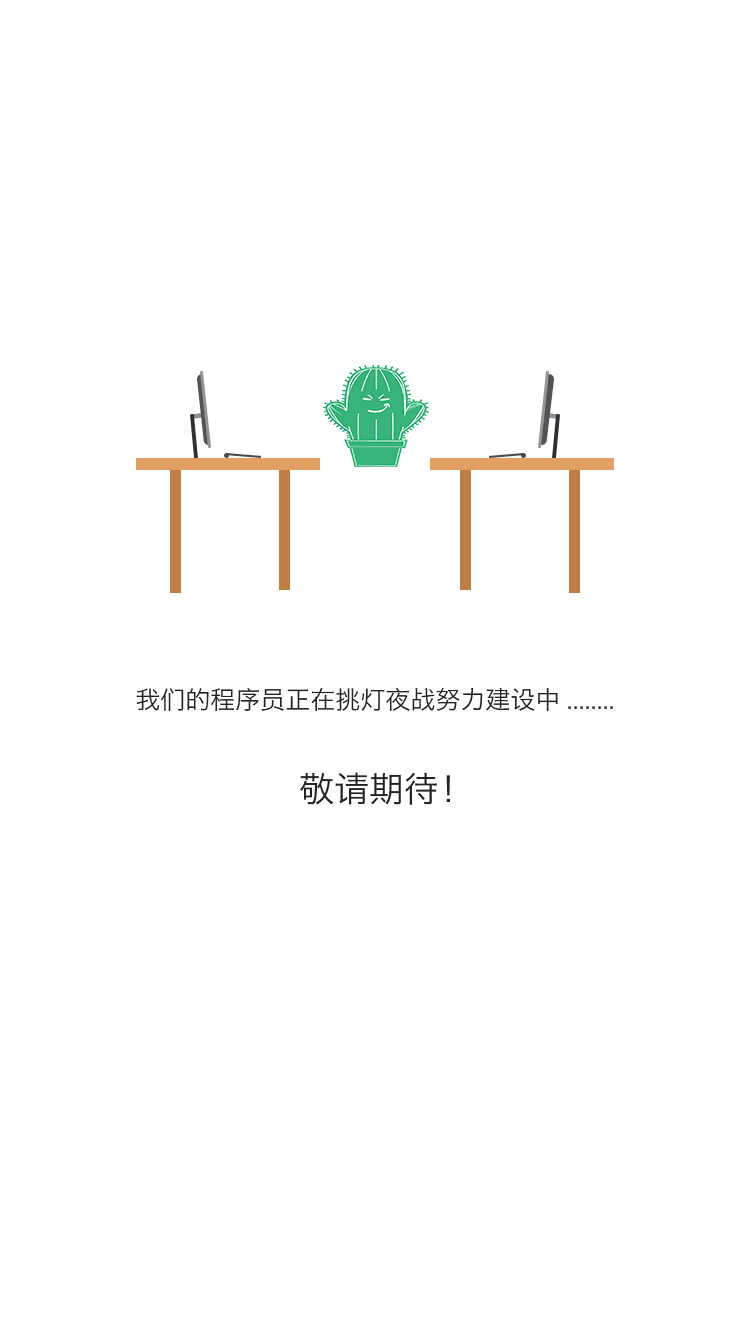
<style>
.page{position:relative;width:750px;height:1334px;background:#ffffff}
.page>*{position:absolute;margin:0}
.t1{font:25px "MingHei_R";color:#232326}
.t2{font:35px "MingHei_R";color:#232326}
</style>
<div class="page">
<p class="t1" style="left:136px;top:688px;width:477px;height:23px">我们的程序员正在挑灯夜战努力建设中........</p>
<p class="t2" style="left:300px;top:772px;width:150px;height:33px">敬请期待！</p>
</div>
